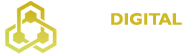
<style>
.page{position:relative;width:189px;height:54px;background:#ffffff}
.page>*{position:absolute;margin:0}
.t1{font:16.7px/16.4px "GillSansMT-Bold";letter-spacing:0.005em;color:#cfb923}
.t2{font:16.7px/16.4px "GillSansMT-Bold";letter-spacing:0.005em;color:#ffffff}
</style>
<div class="page">
<p class="t1" style="left:57px;top:13px;width:125px;height:29px"><span class="t2">APEX </span>DIGITAL<br><span class="t2">CHAIN</span></p>
</div>
